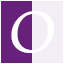
<style>
.page{position:relative;width:64px;height:64px;background:#68217a}
.page>*{position:absolute;margin:0}
.t1{font:62.5px "HighTowerText-Italic";color:#ffffff}
</style>
<div class="page">
<p class="t1" style="left:11px;top:11px;width:43px;height:42px">O</p>
</div>
